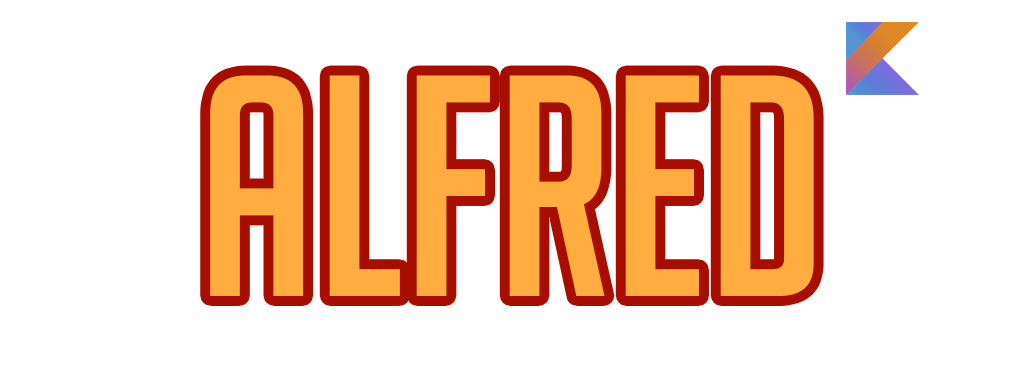
<style>
.page{position:relative;width:1024px;height:370px;background:#ffffff}
.page>*{position:absolute;margin:0}
.t1{font:307.4px "BigNoodleTitling";color:#ffad3e}
</style>
<div class="page">
<p class="t1" style="left:210px;top:75px;width:604px;height:221px">Alfred</p>
</div>
